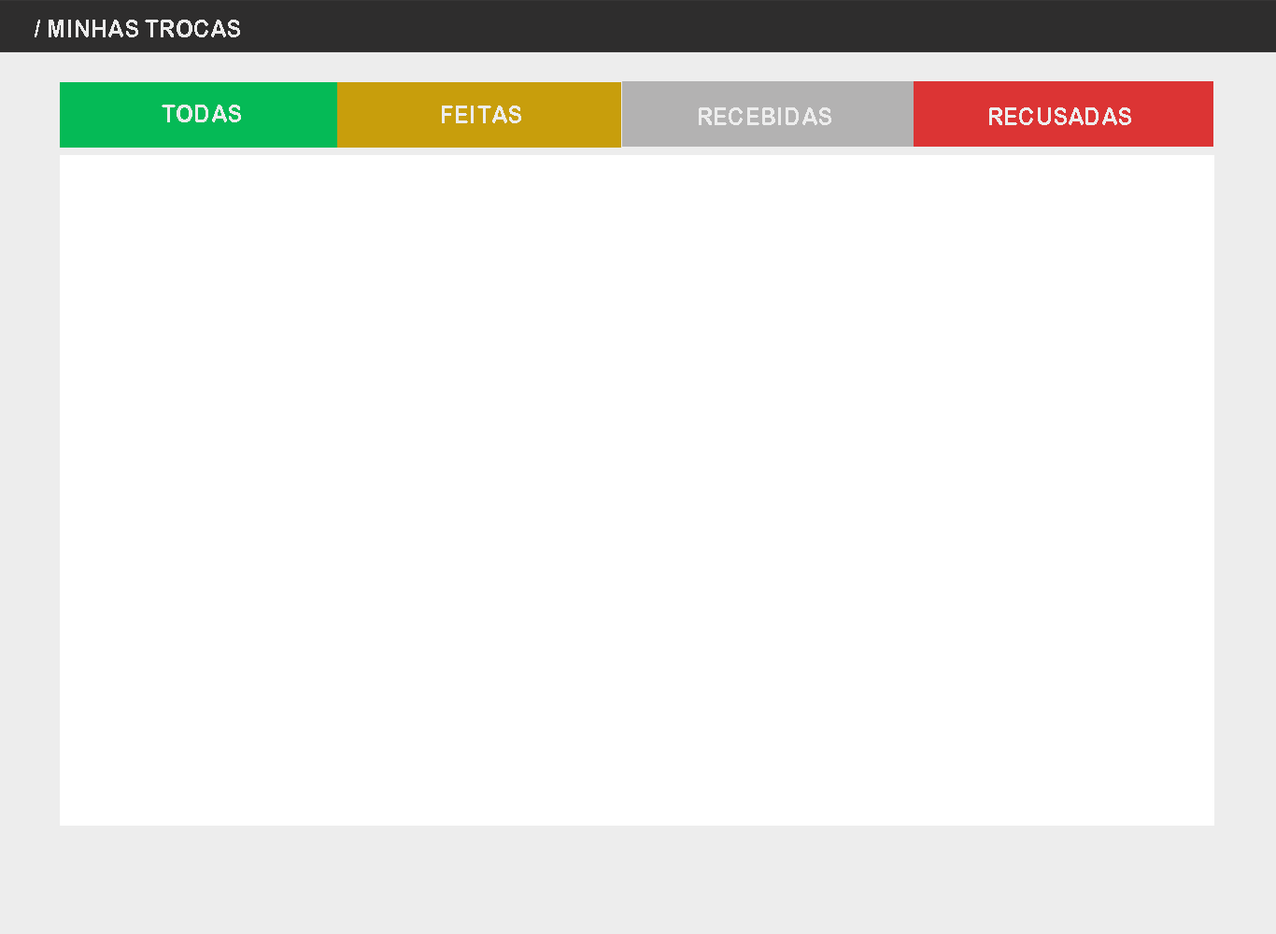
<style>
.page{position:relative;width:1276px;height:934px;background:#ffffff}
.page>*{position:absolute;margin:0}
.t1{font:24.3px "ArialRoundedMTBold";letter-spacing:0.01em;color:#ebebeb;scale:0.92 1}
.t2{font:24.3px "ArialRoundedMTBold";letter-spacing:0.01em;color:#ededed;scale:0.92 1}
</style>
<div class="page">
<p class="t1" style="left:35px;top:20px;width:205px;height:17px">/ MINHAS TROCAS</p>
<p class="t2" style="left:162px;top:105px;width:79px;height:17px">TODAS</p>
<p class="t2" style="left:442px;top:106px;width:79px;height:17px">FEITAS</p>
<p class="t2" style="left:699px;top:107px;width:133px;height:18px">RECEBIDAS</p>
<p class="t2" style="left:989px;top:107px;width:142px;height:18px">RECUSADAS</p>
</div>
